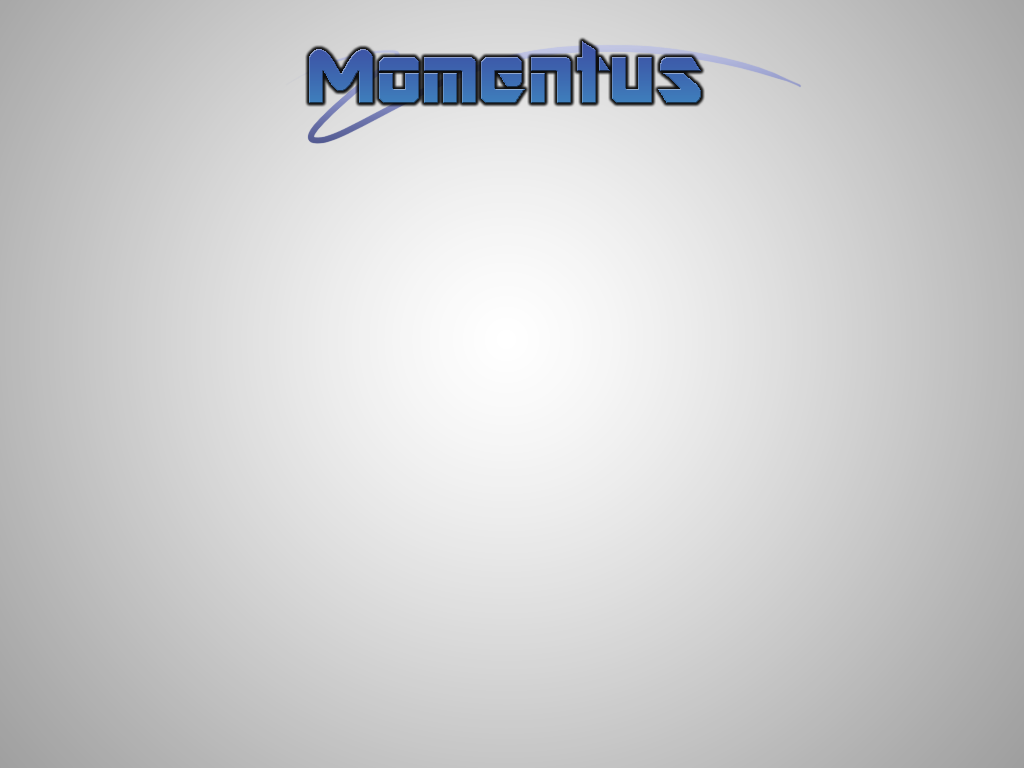
<style>
.page{position:relative;width:1024px;height:768px}
.page>*{position:absolute;margin:0}
.t1{font:86px "ARDESTINE";color:#3d6ab1}
</style>
<div class="page">
<p class="t1" style="left:309px;top:41px;width:392px;height:62px">Momentus</p>
<p class="t1" style="left:309px;top:41px;width:392px;height:62px">Momentus</p>
<p class="t1" style="left:309px;top:41px;width:392px;height:62px">Momentus</p>
</div>
